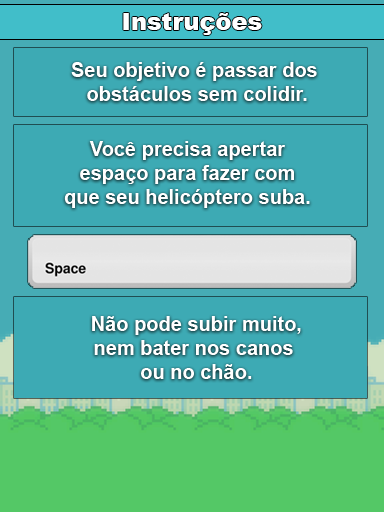
<style>
.page{position:relative;width:384px;height:512px;background:#3daab4}
.page>*{position:absolute;margin:0}
.t1{font:24px "Arial-Black";color:#ffffff}
.t2{font:20px "Arial-BoldMT";color:#ffffff}
</style>
<div class="page">
<p class="t1" style="left:123px;top:13px;width:139px;height:22px">Instruções</p>
<p class="t2" style="left:71px;top:62px;width:246px;height:39px;text-align:center">Seu objetivo é passar dos <br>obstáculos sem colidir.</p>
<p class="t2" style="left:64px;top:141px;width:246px;height:67px;text-align:center">Você precisa apertar<br>espaço para fazer com<br>que seu helicóptero suba.</p>
<p class="t2" style="left:92px;top:316px;width:209px;height:63px;text-align:center">Não pode subir muito,<br>nem bater nos canos <br>ou no chão.</p>
</div>
